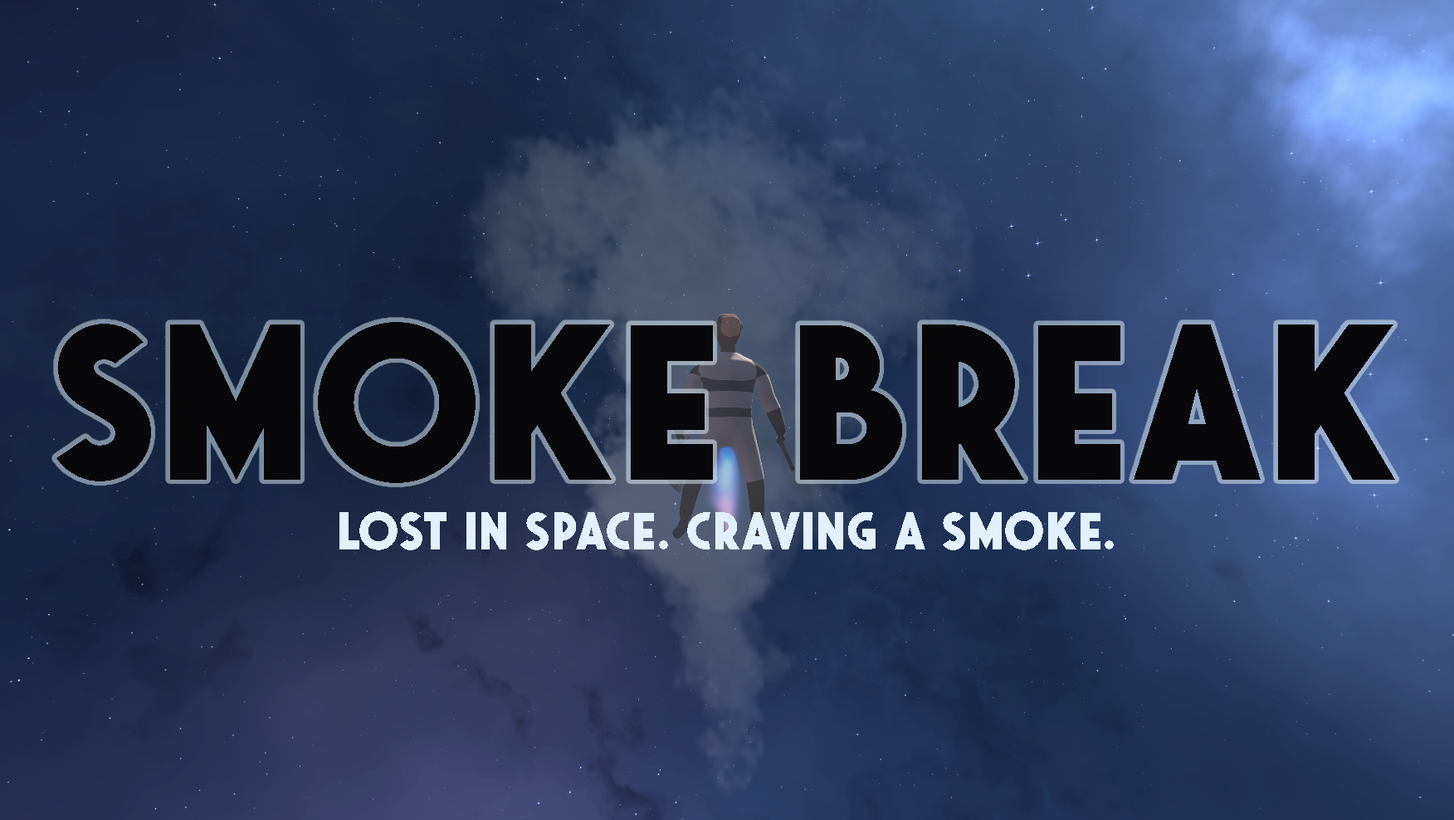
<style>
.page{position:relative;width:1454px;height:820px}
.page>*{position:absolute;margin:0}
.t1{font:221.3px "SaveurSans-Bold";color:#08080b}
.t2{font:53.1px "SaveurSans-Bold";color:#e1f2fe}
</style>
<div class="page">
<p class="t1" style="left:56px;top:322px;width:1339px;height:161px">SMOKE BREAK</p>
<p class="t2" style="left:339px;top:511px;width:775px;height:39px">Lost in space. Craving a smoke.</p>
</div>
